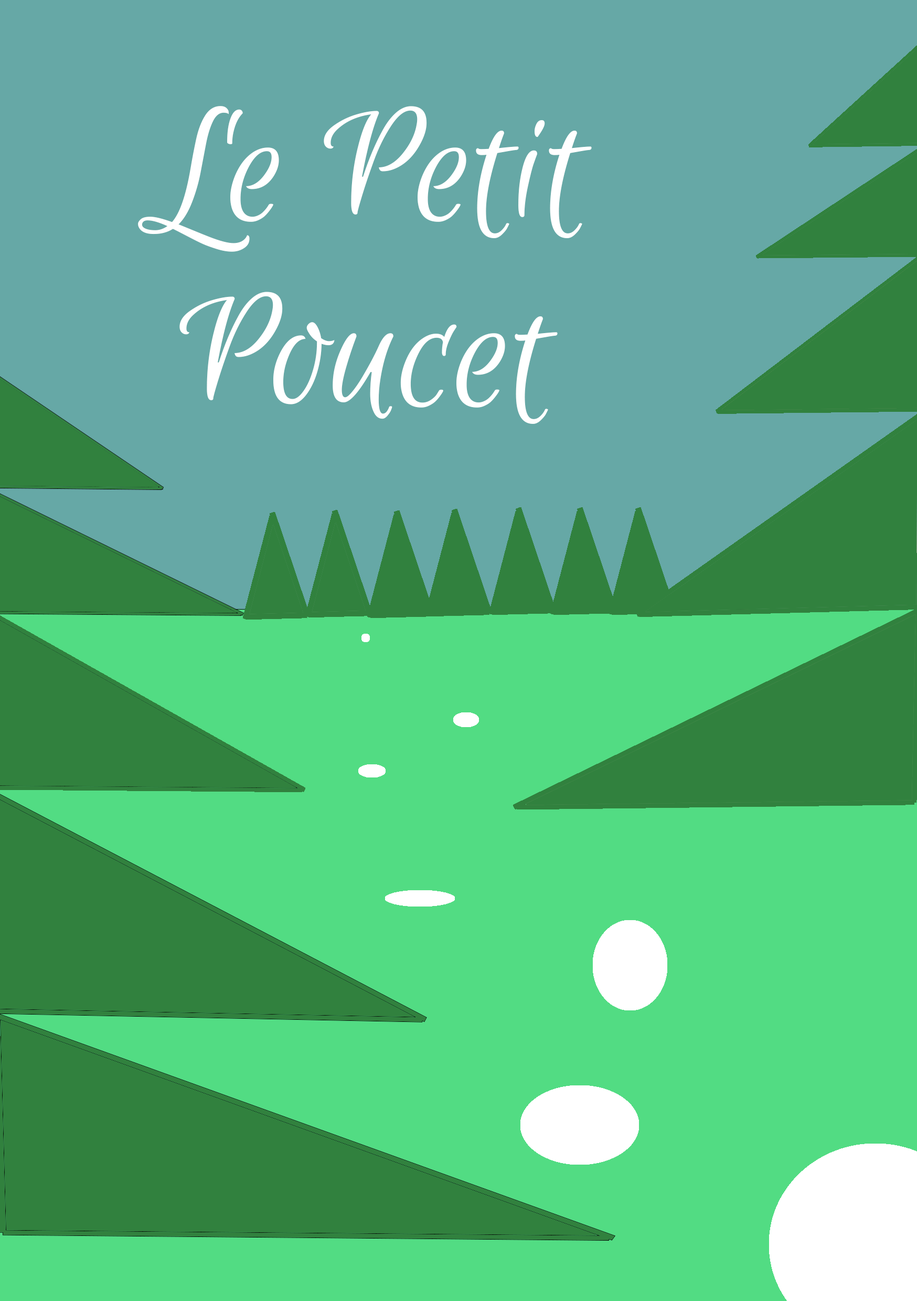
<style>
.page{position:relative;width:917px;height:1301px;background:#66a8a6}
.page>*{position:absolute;margin:0}
.t1{font:179.2px/185.7px "EuphoriaScript-Regular";color:#ffffff}
</style>
<div class="page">
<p class="t1" style="left:138px;top:106px;width:454px;height:318px;text-align:center">Le Petit Poucet</p>
</div>
